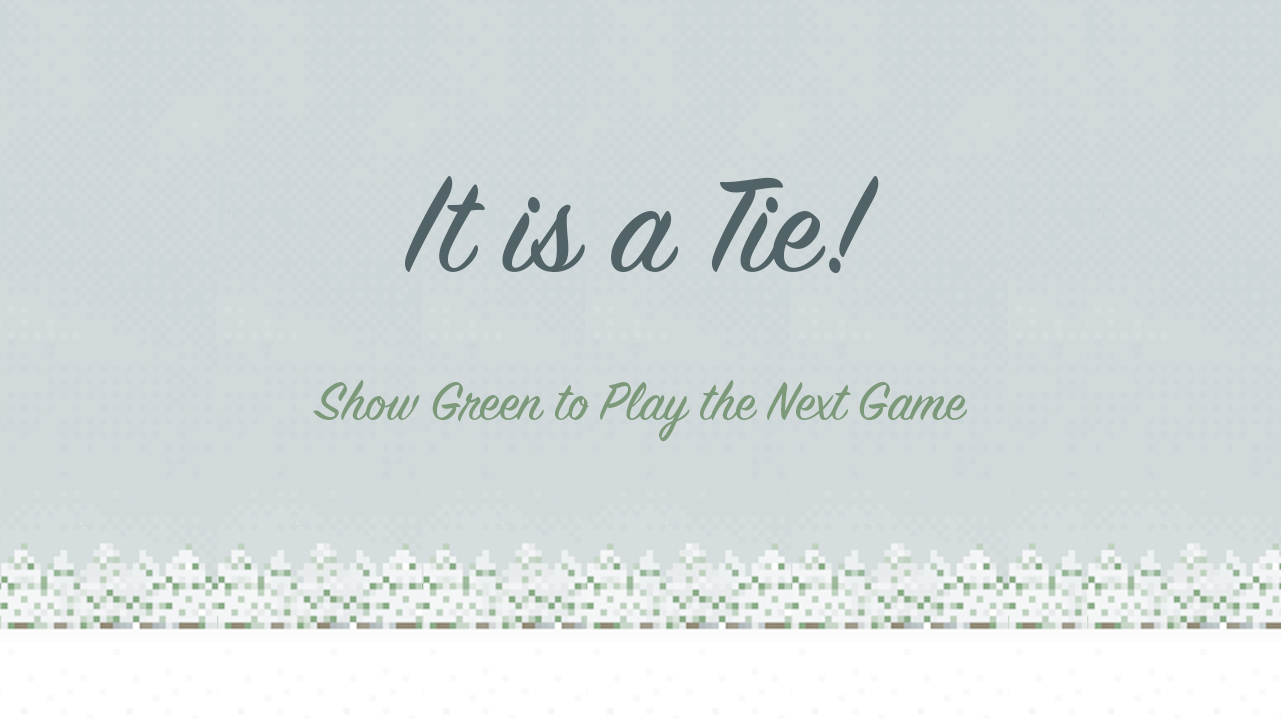
<style>
.page{position:relative;width:1281px;height:719px;background:#d1d9db}
.page>*{position:absolute;margin:0}
.t1{font:150px "SignPainter-HouseScript";color:#516366}
.t2{font:60px "SignPainter-HouseScript";color:#7c997a}
</style>
<div class="page">
<p class="t1" style="left:405px;top:176px;width:474px;height:97px">It is a Tie!</p>
<p class="t2" style="left:313px;top:379px;width:654px;height:63px">Show Green to Play the Next Game</p>
</div>
